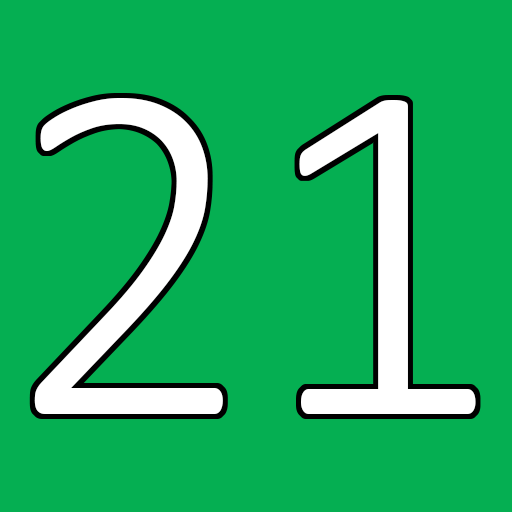
<style>
.page{position:relative;width:512px;height:512px;background:#05af52}
.page>*{position:absolute;margin:0}
.t1{font:493.9px "Calibri-Light";color:#ffffff}
</style>
<div class="page">
<p class="t1" style="left:34px;top:98px;width:442px;height:316px">21</p>
</div>
